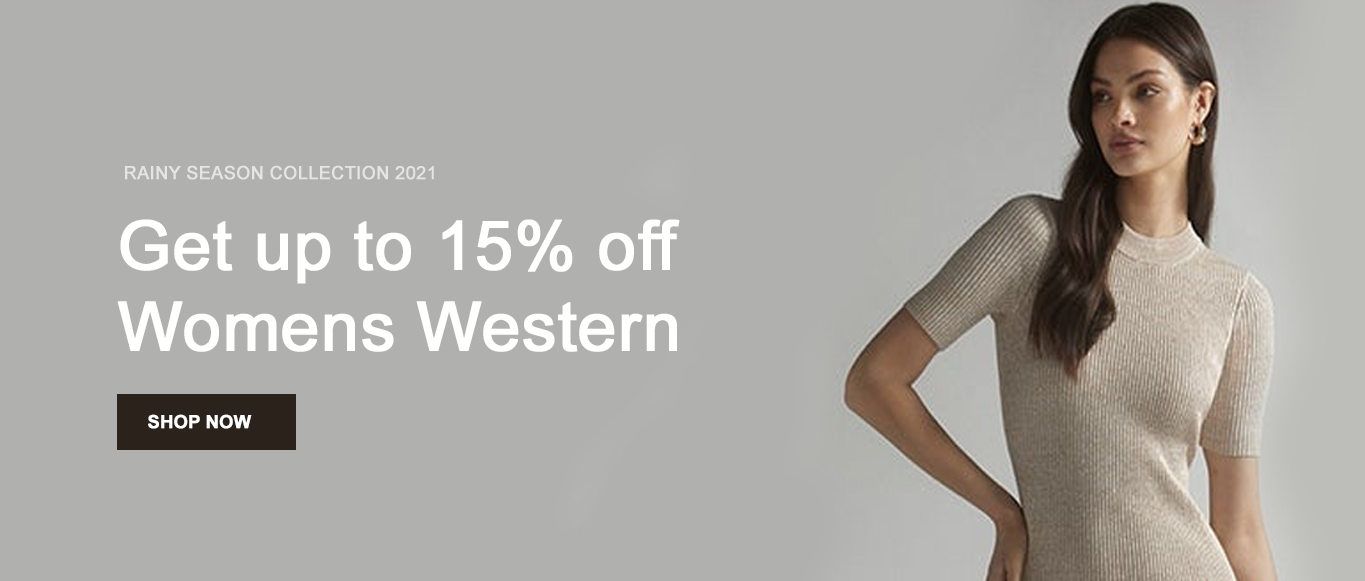
<style>
.page{position:relative;width:1365px;height:581px;background:#b0b0ae}
.page>*{position:absolute;margin:0}
.t1{font:18px "ArialMT";color:#e5e5e3;font-weight:bold}
.t2{font:68px "ArialMT";color:#fffffe;font-weight:bold}
.t3{font:18px "Arial-BoldMT";color:#ffffff;font-weight:bold}
</style>
<div class="page">
<p class="t1" style="left:125px;top:165px;width:309px;height:15px">RAINY SEASON COLLECTION 2021</p>
<p class="t2" style="left:117px;top:219px;width:563px;height:133px">Get up to 15% off<br>Womens Western</p>
<p class="t3" style="left:148px;top:414px;width:104px;height:15px">SHOP NOW</p>
</div>
